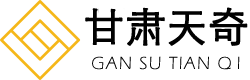
<style>
.page{position:relative;width:250px;height:80px;background:#ffffff}
.page>*{position:absolute;margin:0}
.t1{font:40px "STXihei";letter-spacing:0.01em;color:#010101;font-weight:bold}
.t2{font:18px "ErasITC-Light";letter-spacing:0.081em;color:#000000}
</style>
<div class="page">
<p class="t1" style="left:85px;top:7px;width:163px;height:39px">甘肃天奇</p>
<p class="t2" style="left:92px;top:56px;width:148px;height:14px">GAN SU TIAN Q I</p>
</div>
